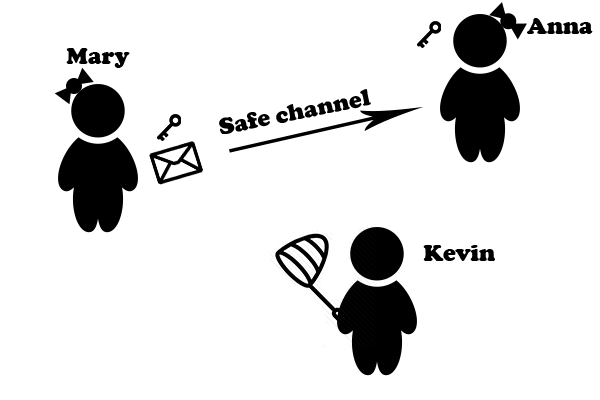
<style>
.page{position:relative;width:600px;height:400px;background:#ffffff}
.page>*{position:absolute;margin:0}
.t1{font:24px "CooperBlack";color:#000000}
</style>
<div class="page">
<p class="t1" style="left:527px;top:18px;width:66px;height:16px">Anna</p>
<p class="t1" style="left:66px;top:48px;width:64px;height:20px">Mary</p>
<p class="t1" style="left:219px;top:89px;width:152px;height:45px;rotate:-12deg">Safe channel</p>
<p class="t1" style="left:423px;top:245px;width:72px;height:16px">Kevin</p>
</div>
